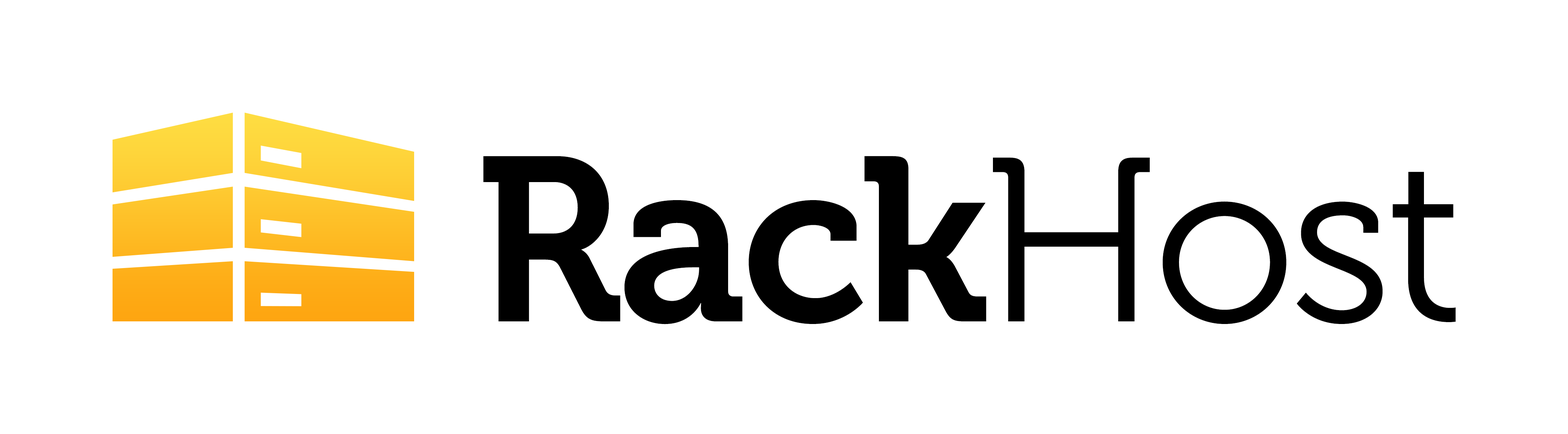
<style>
.page{position:relative;width:1568px;height:434px;background:#ffffff}
.page>*{position:absolute;margin:0}
.t1{font:232.6px "Museo700-Regular";letter-spacing:-0.025em;color:#000000}
.t2{font:232.6px "Museo300-Regular";letter-spacing:-0.025em;color:#000000}
</style>
<div class="page">
<p class="t1" style="left:483px;top:156px;width:973px;height:168px">Rack<span class="t2">Host</span></p>
</div>
